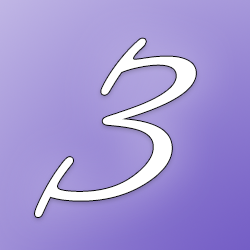
<style>
.page{position:relative;width:250px;height:250px}
.page>*{position:absolute;margin:0}
.t1{font:250px "InformalRoman-Regular";color:#ffffff}
</style>
<div class="page">
<p class="t1" style="left:35px;top:38px;width:161px;height:179px">3</p>
</div>
